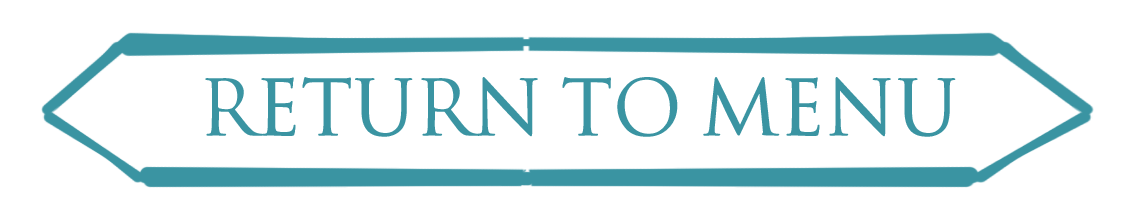
<style>
.page{position:relative;width:1144px;height:224px;background:#ffffff}
.page>*{position:absolute;margin:0}
.t1{font:75px "SpaceandAstronomy";color:#3a94a2}
</style>
<div class="page">
<p class="t1" style="left:205px;top:77px;width:751px;height:60px">Return to menu</p>
</div>
